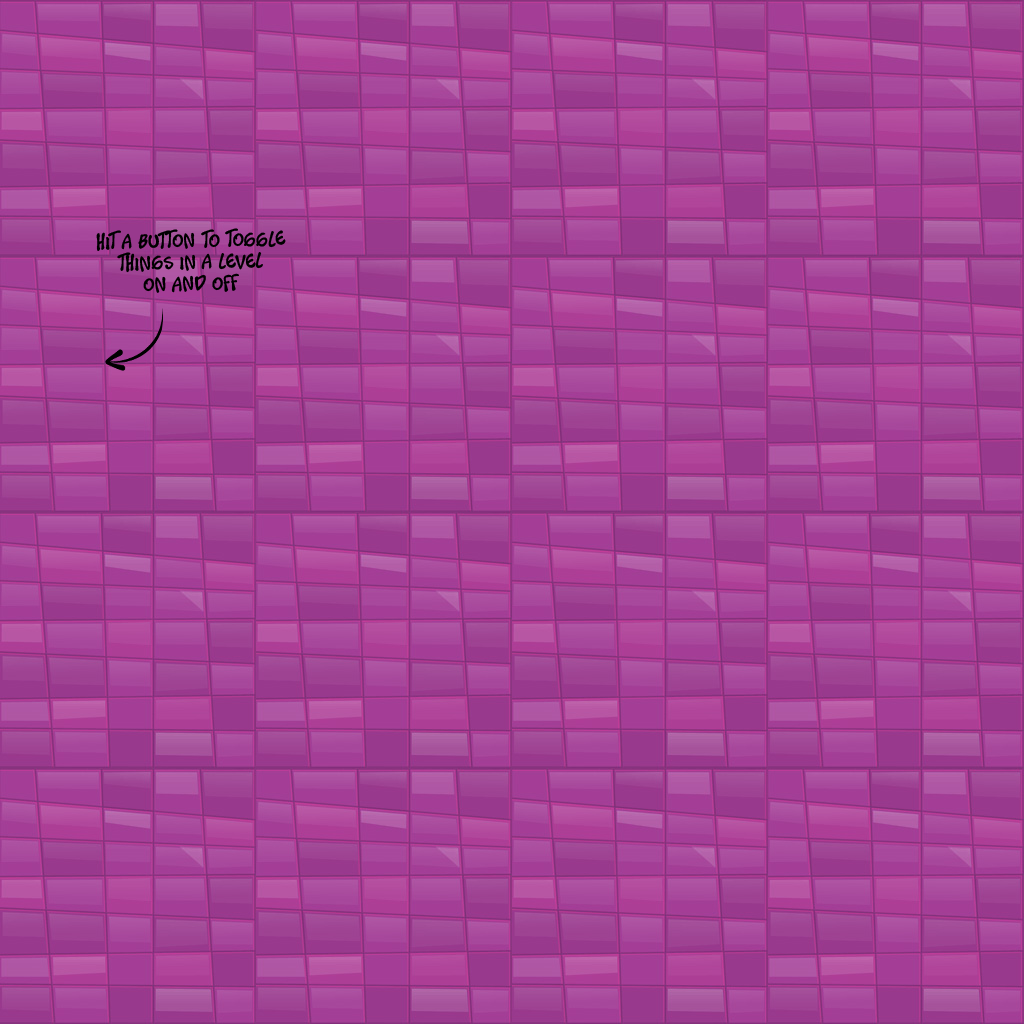
<style>
.page{position:relative;width:1024px;height:1024px}
.page>*{position:absolute;margin:0}
.t1{font:18px "Timotheos";letter-spacing:0.025em;color:#000000}
</style>
<div class="page">
<p class="t1" style="left:96px;top:228px;width:190px;height:65px;text-align:center;rotate:-1deg">hit a button to toggle<br>things in a level<br>on and off</p>
</div>
